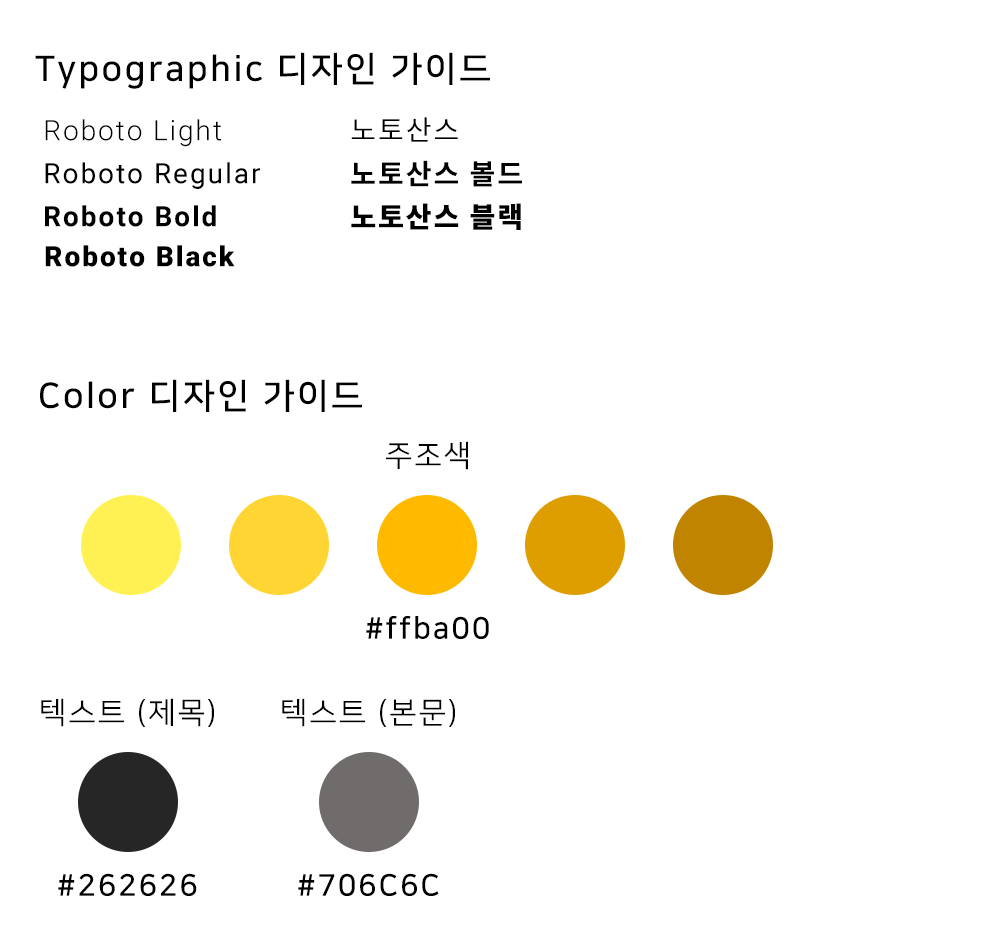
<style>
.page{position:relative;width:1000px;height:944px;background:#ffffff}
.page>*{position:absolute;margin:0}
.t1{font:35px "NanumSquareB";letter-spacing:0.07em;color:#000000}
.t2{font:28px "Roboto-Light";letter-spacing:0.07em;color:#000000}
.t3{font:28px "NotoSansKR-Regular";letter-spacing:0.07em;color:#000000}
.t4{font:28px "NotoSansKR-Bold";letter-spacing:0.07em;color:#000000}
.t5{font:28px "Roboto-Regular";letter-spacing:0.07em;color:#000000}
.t6{font:28px "Roboto-Bold";letter-spacing:0.07em;color:#000000}
.t7{font:28px "NotoSansKR-Black";letter-spacing:0.07em;color:#000000}
.t8{font:28px "Roboto-Black";letter-spacing:0.07em;color:#000000}
.t9{font:30px "NanumSquareR";letter-spacing:0.07em;color:#000000}
.t10{font:30px "NanumSquareB";letter-spacing:0.07em;color:#000000}
</style>
<div class="page">
<p class="t1" style="left:35px;top:52px;width:455px;height:37px">Typographic 디자인 가이드</p>
<p class="t2" style="left:45px;top:119px;width:176px;height:28px">Roboto Light</p>
<p class="t3" style="left:351px;top:117px;width:107px;height:25px">노토산스</p>
<p class="t4" style="left:351px;top:160px;width:171px;height:27px">노토산스 볼드</p>
<p class="t5" style="left:45px;top:162px;width:215px;height:27px">Roboto Regular</p>
<p class="t6" style="left:45px;top:205px;width:171px;height:22px">Roboto Bold</p>
<p class="t7" style="left:351px;top:203px;width:170px;height:27px">노토산스 블랙</p>
<p class="t8" style="left:45px;top:245px;width:190px;height:22px">Roboto Black</p>
<p class="t1" style="left:40px;top:379px;width:322px;height:33px">Color 디자인 가이드</p>
<p class="t9" style="left:386px;top:441px;width:82px;height:29px">주조색</p>
<p class="t10" style="left:366px;top:616px;width:123px;height:23px">#ffba00</p>
<p class="t9" style="left:41px;top:698px;width:173px;height:29px">텍스트 (제목)</p>
<p class="t9" style="left:282px;top:698px;width:173px;height:29px">텍스트 (본문)</p>
<p class="t10" style="left:58px;top:873px;width:139px;height:23px">#262626</p>
<p class="t10" style="left:298px;top:873px;width:141px;height:23px">#706C6C</p>
</div>
